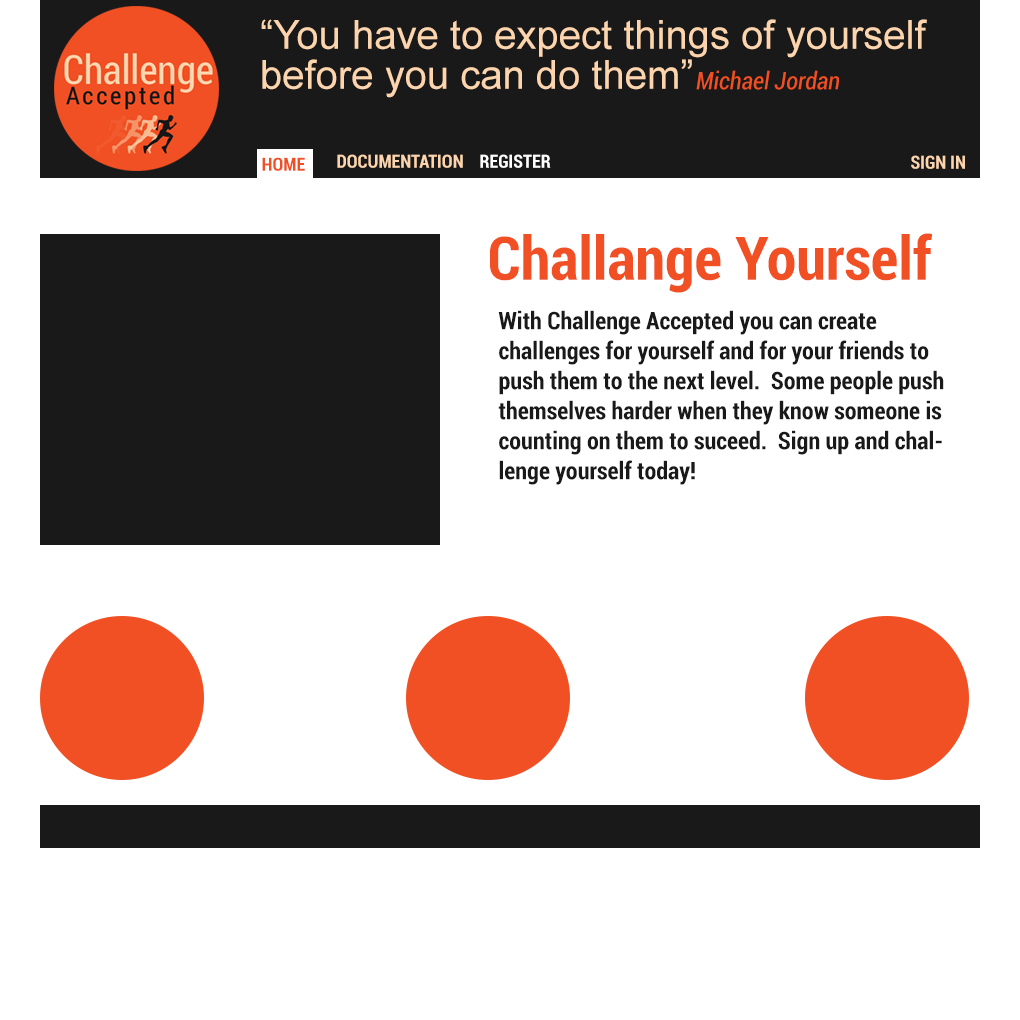
<style>
.page{position:relative;width:1020px;height:1020px;background:#ffffff}
.page>*{position:absolute;margin:0}
.t1{font:40px/40px "ArialMT";color:#fcd4ad}
.t2{font:24px "Roboto-CondensedItalic";color:#f05023}
.t3{font:18px "Roboto-BoldCondensed";color:#f05023}
.t4{font:18px "Roboto-BoldCondensed";color:#fcd4ad}
.t5{font:18px "Roboto-BoldCondensed";color:#ffffff}
.t6{font:60px "Roboto-BoldCondensed";color:#f05023}
.t7{font:24px/30px "Roboto-BoldCondensed";color:#191919}
</style>
<div class="page">
<p class="t1" style="left:261px;top:19px;width:666px;height:79px">“You have to expect things of yourself before you can do them”</p>
<p class="t2" style="left:696px;top:70px;width:143px;height:20px">Michael Jordan</p>
<p class="t3" style="left:262px;top:157px;width:43px;height:14px">HOME</p>
<p class="t4" style="left:337px;top:154px;width:126px;height:14px">DOCUMENTATION</p>
<p class="t5" style="left:480px;top:154px;width:71px;height:14px">REGISTER</p>
<p class="t4" style="left:911px;top:155px;width:54px;height:14px">SIGN IN</p>
<p class="t6" style="left:490px;top:233px;width:442px;height:60px">Challange Yourself</p>
<p class="t7" style="left:498px;top:310px;width:446px;height:175px">With Challenge Accepted you can create <br>challenges for yourself and for your friends to push them to the next level.  Some people push themselves harder when they know someone is counting on them to suceed.  Sign up and challenge yourself today!</p>
</div>
